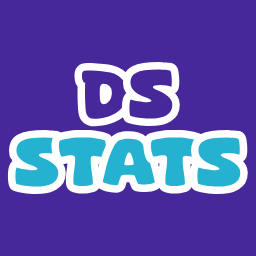
<style>
.page{position:relative;width:256px;height:256px;background:#47289b}
.page>*{position:absolute;margin:0}
.t1{font:57px "SuperComic"}
</style>
<div class="page">
<p class="t1" style="left:7px;top:61px;width:242px;height:134px;text-align:center">DS<br>Stats</p>
</div>
